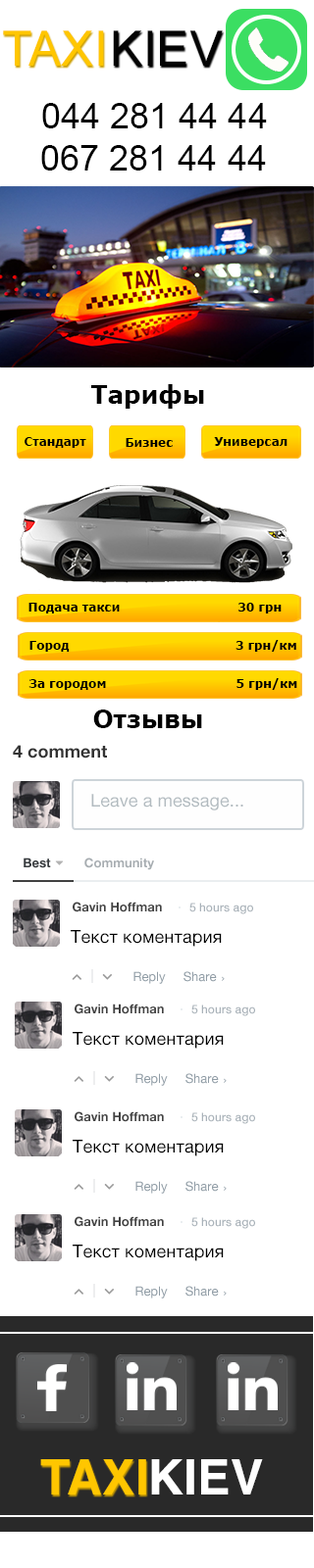
<style>
.page{position:relative;width:314px;height:1568px;background:#ffffff}
.page>*{position:absolute;margin:0}
.t1{font:49px "ArialMT";color:#ffc600}
.t2{font:49px "ArialMT";color:#040404}
.t3{font:35.3px "ArialMT";color:#000000}
.t4{font:24.5px "Verdana-Bold";color:#000000}
.t5{font:11.8px "Verdana-Bold";color:#000000}
.t6{font:17.6px "HelveticaNeue-Bold";color:#333333}
.t7{font:17.6px "HelveticaNeue";letter-spacing:0.005em;color:#b2bbc0}
.t8{font:12.7px "HelveticaNeue-Bold";color:#a7adb1}
.t9{font:12.7px "HelveticaNeue-Bold";color:#424242}
.t10{font:11.8px "HelveticaNeue-Medium";color:#a9b2b9}
.t11{font:17.6px "HelveticaNeue";letter-spacing:0.005em;color:#000000}
.t12{font:49px "Helvetica-Bold";color:#ffc600}
.t13{font:49px "Helvetica-Bold";color:#ffffff}
</style>
<div class="page">
<p class="t1" style="left:3px;top:30px;width:101px;height:36px">TAXI</p>
<p class="t2" style="left:113px;top:30px;width:109px;height:36px">KIEV</p>
<p class="t3" style="left:42px;top:103px;width:225px;height:25px">044 281 44 44</p>
<p class="t3" style="left:41px;top:145px;width:225px;height:26px">067 281 44 44</p>
<p class="t4" style="left:91px;top:384px;width:113px;height:25px">Тарифы</p>
<p class="t5" style="left:24px;top:437px;width:62px;height:11px">Стандарт</p>
<p class="t5" style="left:214px;top:437px;width:73px;height:11px">Универсал</p>
<p class="t5" style="left:125px;top:438px;width:47px;height:9px">Бизнес</p>
<p class="t5" style="left:28px;top:603px;width:253px;height:10px">Подача такси                             30 грн</p>
<p class="t5" style="left:29px;top:640px;width:267px;height:12px">Город                                         3 грн/км</p>
<p class="t5" style="left:28px;top:678px;width:269px;height:12px">За городом                                5 грн/км</p>
<p class="t4" style="left:93px;top:710px;width:109px;height:18px">Отзывы</p>
<p class="t6" style="left:13px;top:745px;width:94px;height:14px">4 comment</p>
<p class="t7" style="left:91px;top:794px;width:152px;height:16px">Leave a message...</p>
<p class="t8" style="left:84px;top:858px;width:70px;height:12px">Community</p>
<p class="t9" style="left:73px;top:902px;width:89px;height:10px">Gavin Hoffman</p>
<p class="t10" style="left:189px;top:903px;width:64px;height:11px">5 hours ago</p>
<p class="t11" style="left:71px;top:930px;width:150px;height:17px">Текст коментария</p>
<p class="t9" style="left:74px;top:1004px;width:90px;height:10px">Gavin Hoffman</p>
<p class="t10" style="left:191px;top:1004px;width:64px;height:12px">5 hours ago</p>
<p class="t11" style="left:73px;top:1032px;width:150px;height:17px">Текст коментария</p>
<p class="t9" style="left:74px;top:1111px;width:90px;height:11px">Gavin Hoffman</p>
<p class="t10" style="left:191px;top:1112px;width:64px;height:12px">5 hours ago</p>
<p class="t11" style="left:73px;top:1140px;width:150px;height:16px">Текст коментария</p>
<p class="t9" style="left:74px;top:1216px;width:90px;height:11px">Gavin Hoffman</p>
<p class="t10" style="left:191px;top:1217px;width:64px;height:12px">5 hours ago</p>
<p class="t11" style="left:73px;top:1245px;width:150px;height:16px">Текст коментария</p>
<p class="t12" style="left:40px;top:1459px;width:106px;height:35px">TAXI</p>
<p class="t13" style="left:151px;top:1459px;width:112px;height:35px">KIEV</p>
</div>
